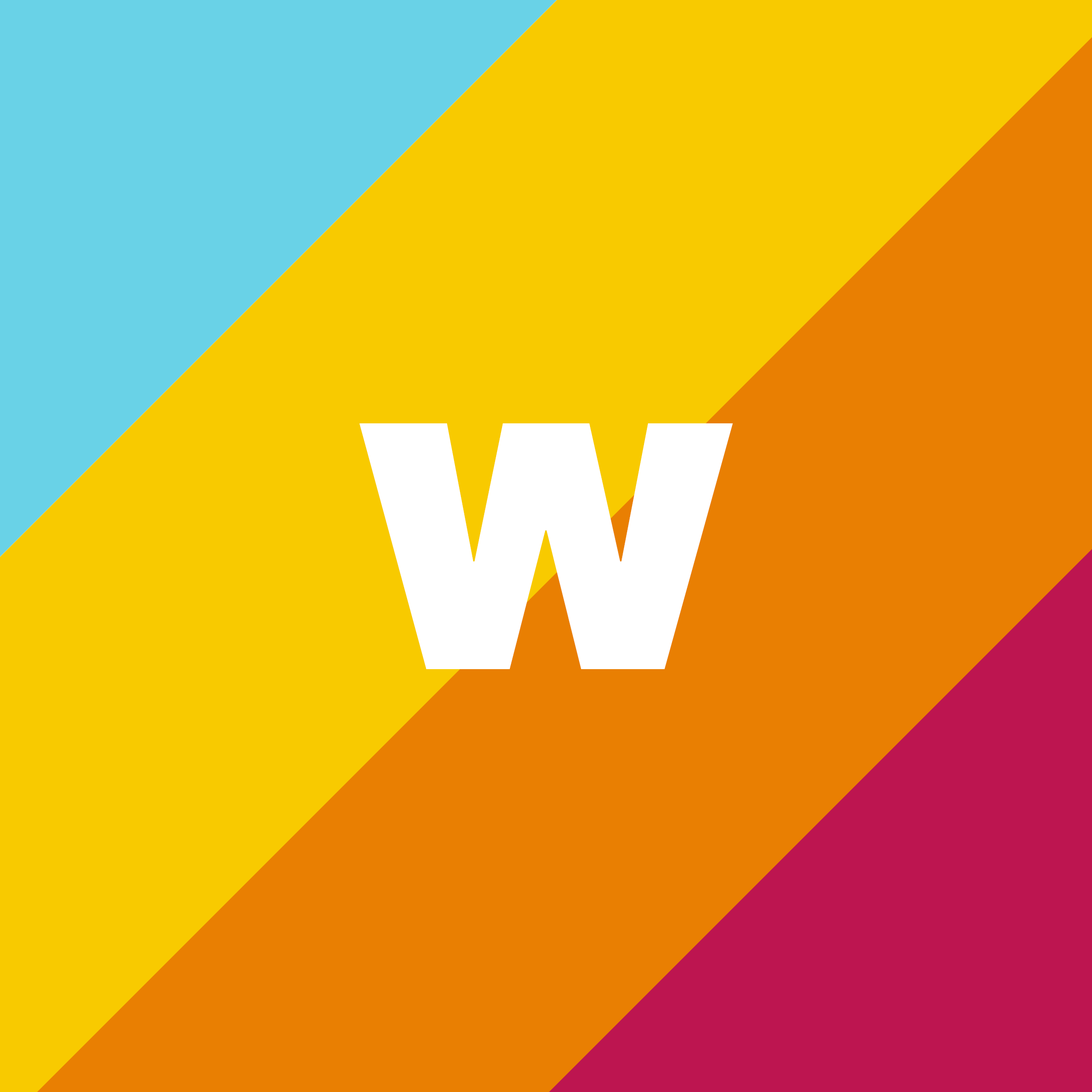
<style>
.page{position:relative;width:1092px;height:1092px;background:#f8ca00}
.page>*{position:absolute;margin:0}
.t1{font:347.2px "AvenirNext-Heavy";letter-spacing:0.02em;color:#ffffff}
</style>
<div class="page">
<p class="t1" style="left:360px;top:423px;width:373px;height:246px">W</p>
</div>
